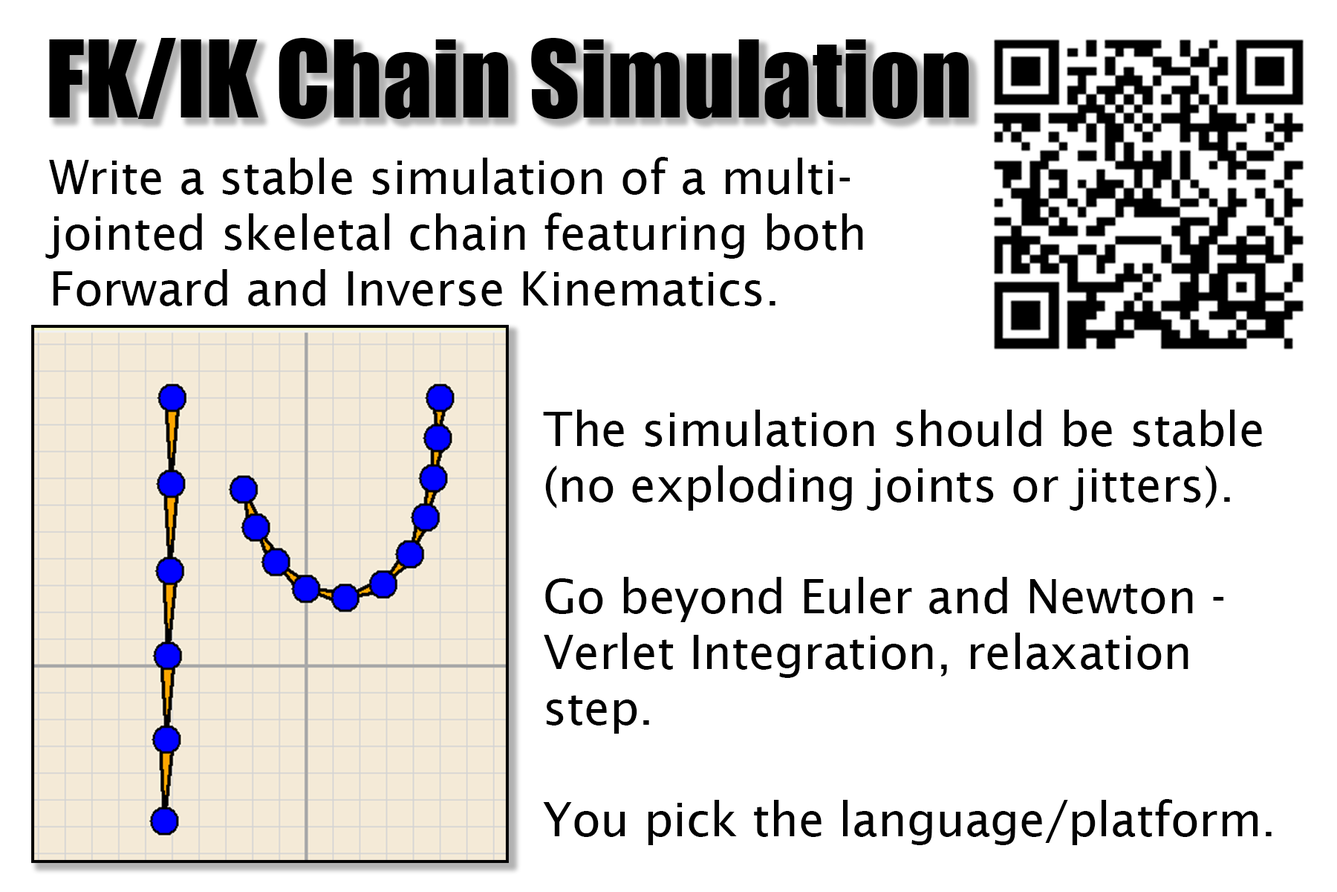
<style>
.page{position:relative;width:1337px;height:892px;background:#ffffff}
.page>*{position:absolute;margin:0}
.t1{font:99.1px "Impact";color:#000000}
.t2{font:46.4px "LucidaSans";color:#000000}
</style>
<div class="page">
<p class="t1" style="left:49px;top:38px;width:921px;height:81px">FK/IK Chain Simulation</p>
<p class="t2" style="left:45px;top:157px;width:818px;height:149px">Write a stable simulation of a multi-<br>jointed skeletal chain featuring both <br>Forward and Inverse Kinematics.</p>
<p class="t2" style="left:543px;top:409px;width:729px;height:436px">The simulation should be stable<br>(no exploding joints or jitters).<br><br>Go beyond Euler and Newton -<br>Verlet Integration, relaxation <br>step.<br><br>You pick the language/platform.</p>
</div>
